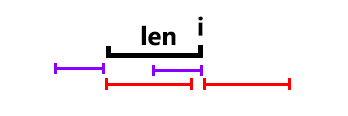
<style>
.page{position:relative;width:348px;height:116px;background:#ffffff}
.page>*{position:absolute;margin:0}
.t1{font:24px "MicrosoftYaHei-Bold";color:#000000}
</style>
<div class="page">
<p class="t1" style="left:198px;top:16px;width:5px;height:20px">i</p>
<p class="t1" style="left:141px;top:25px;width:35px;height:21px">len</p>
</div>
